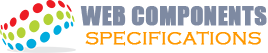
<style>
.page{position:relative;width:268px;height:53px;background:#ffffff}
.page>*{position:absolute;margin:0}
.t1{font:24px "Impact";letter-spacing:0.005em;color:#7e8aa2;font-weight:bold}
.t2{font:18px "CopperplateGothic-Light";letter-spacing:0.005em;color:#ff9800;font-weight:bold}
</style>
<div class="page">
<p class="t1" style="left:80px;top:6px;width:187px;height:20px">WEB COMPONENTS</p>
<p class="t2" style="left:85px;top:31px;width:176px;height:15px">SPECIFICATIONS</p>
</div>
